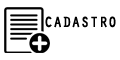
<style>
.page{position:relative;width:120px;height:60px;background:#ffffff}
.page>*{position:absolute;margin:0}
.t1{font:14.6px "Orator";color:#000000;font-weight:bold}
</style>
<div class="page">
<p class="t1" style="left:45px;top:16px;width:71px;height:12px">CADASTRO</p>
</div>
